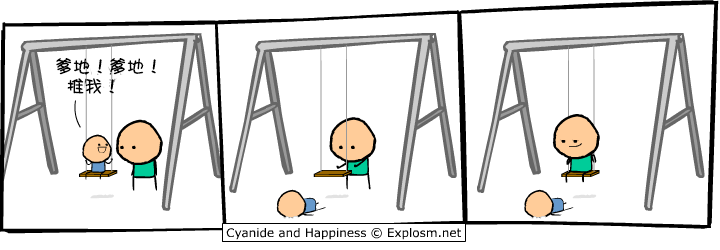
<style>
.page{position:relative;width:720px;height:250px;background:#ffffff}
.page>*{position:absolute;margin:0}
.t1{font:18px/20px "DFPShaoNvW5";color:#000000}
</style>
<div class="page">
<p class="t1" style="left:56px;top:58px;width:100px;height:36px">爹地！爹地！<br>  推我！</p>
</div>
